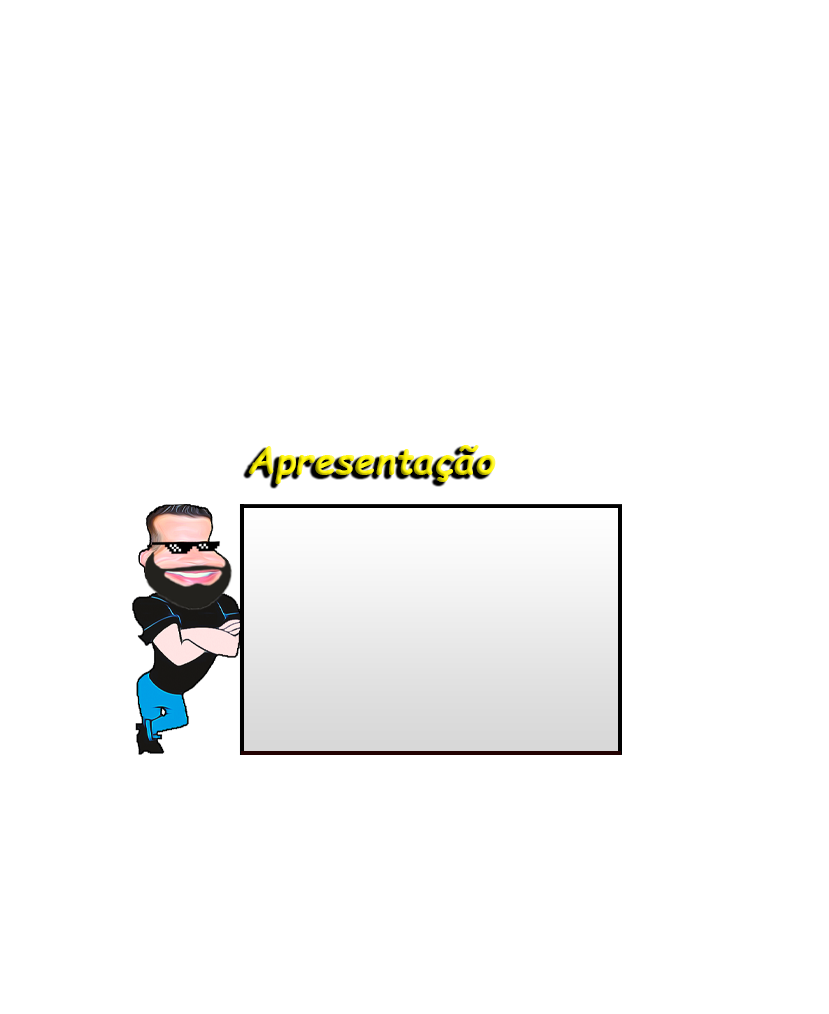
<style>
.page{position:relative;width:829px;height:1014px;background:#ffffff}
.page>*{position:absolute;margin:0}
.t1{font:38.2px "ComicSansMS-BoldItalic"}
</style>
<div class="page">
<p class="t1" style="left:248px;top:445px;width:248px;height:39px">Apresentação</p>
</div>
